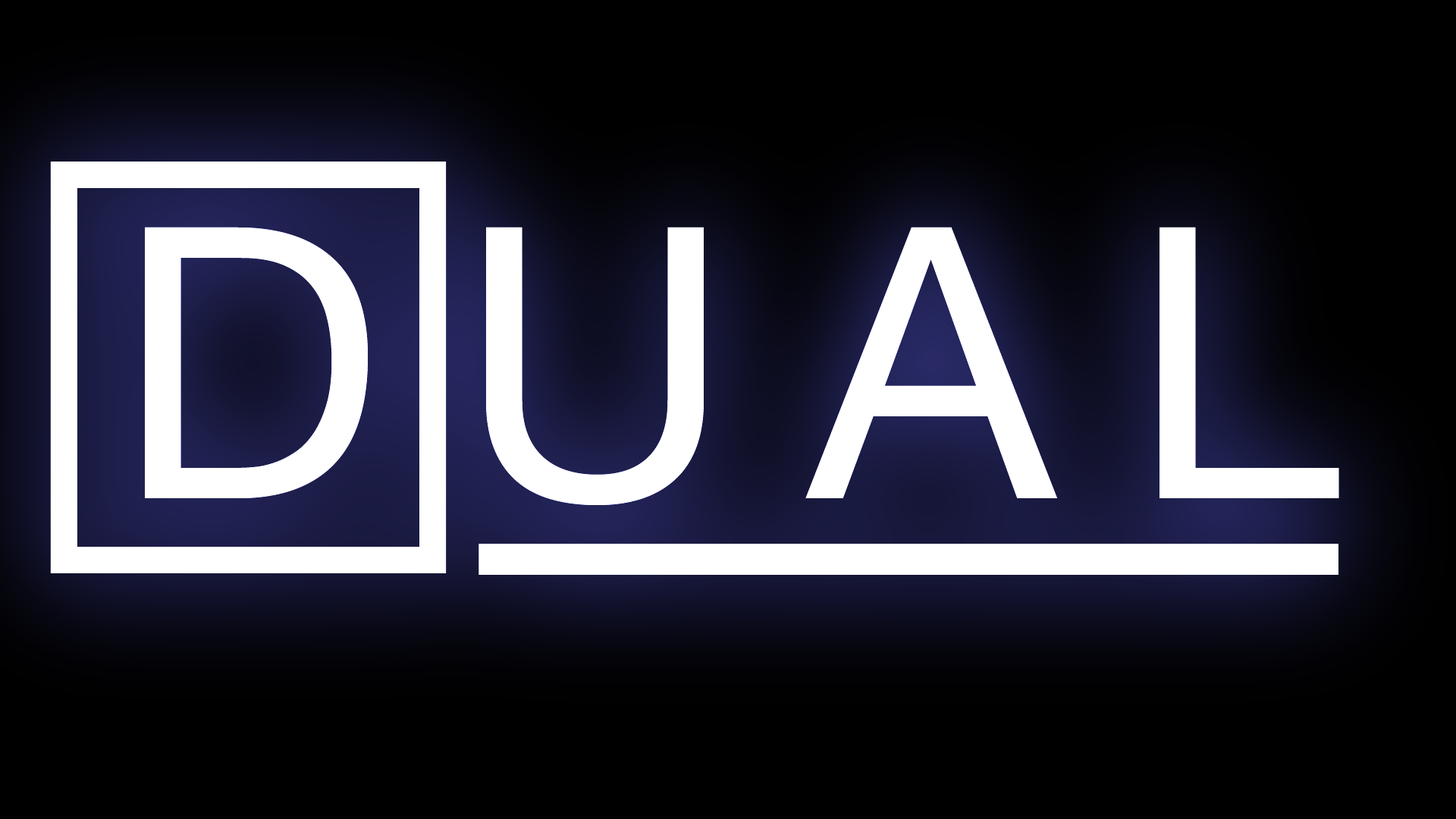
<style>
.page{position:relative;width:1456px;height:819px;background:#000000}
.page>*{position:absolute;margin:0}
.t1{font:379.2px "HelveticaNeueLTCom-Roman";letter-spacing:0.2em;color:#ffffff}
</style>
<div class="page">
<p class="t1" style="left:145px;top:227px;width:1194px;height:278px">DUAL</p>
</div>
